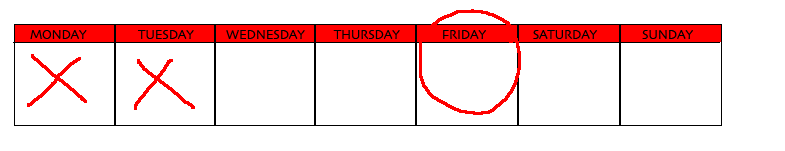
<style>
.page{position:relative;width:785px;height:151px;background:#ffffff}
.page>*{position:absolute;margin:0}
.t1{font:14px "Skia-Regular";color:#000000;scale:0.9 1}
</style>
<div class="page">
<p class="t1" style="left:30px;top:30px;width:663px;height:9px">MONDAY  TUESDAY      WEDNESDAY      THURSDAY      FRIDAY            SATURDAY  SUNDAY</p>
</div>
